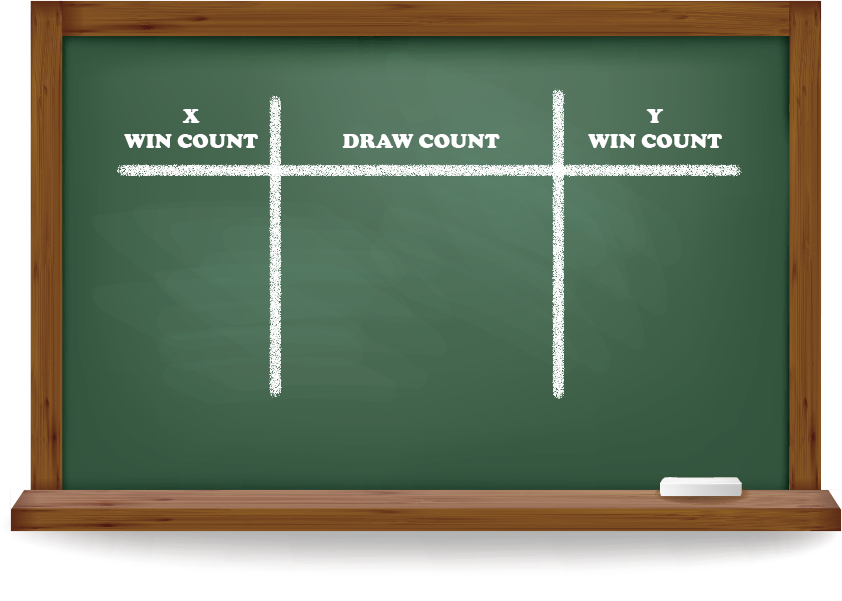
<style>
.page{position:relative;width:842px;height:601px}
.page>*{position:absolute;margin:0}
.t1{font:21px "CooperBlack";color:#ffffff}
</style>
<div class="page">
<p class="t1" style="left:124px;top:109px;width:134px;height:39px;text-align:center">X<br>WIN COUNT</p>
<p class="t1" style="left:588px;top:109px;width:134px;height:39px;text-align:center">Y<br>WIN COUNT</p>
<p class="t1" style="left:342px;top:134px;width:158px;height:14px">DRAW COUNT</p>
</div>
